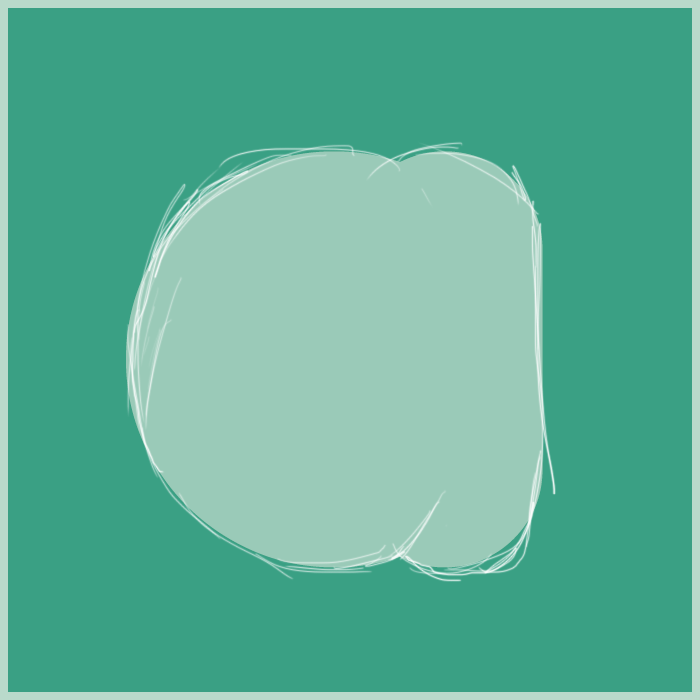
<style>
.page{position:relative;width:700px;height:700px;background:#3aa084}
.page>*{position:absolute;margin:0}
.t1{font:764.1px "Bollard-Fat";color:#9acab8}
</style>
<div class="page">
<p class="t1" style="left:126px;top:151px;width:417px;height:417px">A</p>
</div>
